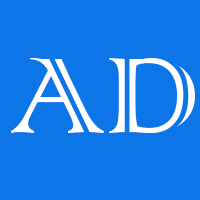
<style>
.page{position:relative;width:200px;height:200px;background:#0c76e9}
.page>*{position:absolute;margin:0}
.t1{font:141.5px "ColonnaMT";color:#ffffff}
</style>
<div class="page">
<p class="t1" style="left:11px;top:58px;width:184px;height:75px">AD</p>
</div>
